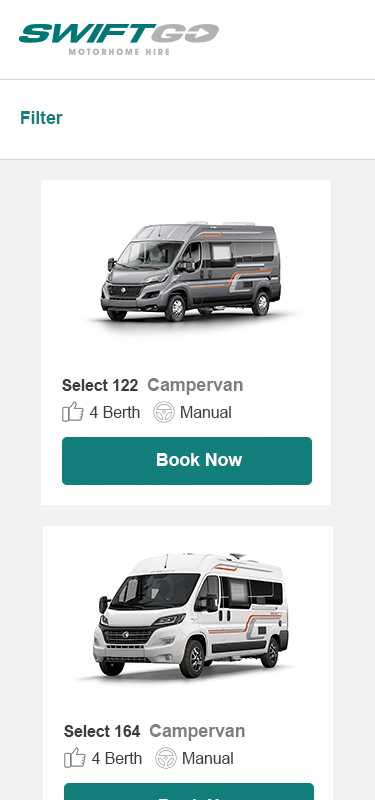
<style>
.page{position:relative;width:375px;height:800px;background:#ffffff}
.page>*{position:absolute;margin:0}
.t1{font:18px "Arial-BoldMT";letter-spacing:-0.01em;color:#117f7a}
.t2{font:16px "Arial-BoldMT";letter-spacing:-0.01em;color:#3c3b3f}
.t3{font:18px "Arial-BoldMT";letter-spacing:-0.01em;color:#7f7e7e}
.t4{font:16px "ArialMT";letter-spacing:-0.01em;color:#3c3b3f}
.t5{font:18px "Arial-BoldMT";letter-spacing:-0.01em;color:#ffffff}
</style>
<div class="page">
<p class="t1" style="left:21px;top:111px;width:42px;height:13px">Filter</p>
<p class="t2" style="left:62px;top:379px;width:76px;height:12px">Select 122</p>
<p class="t3" style="left:147px;top:378px;width:96px;height:17px">Campervan</p>
<p class="t4" style="left:89px;top:406px;width:51px;height:12px">4 Berth</p>
<p class="t4" style="left:181px;top:406px;width:50px;height:12px">Manual</p>
<p class="t5" style="left:157px;top:453px;width:86px;height:13px">Book Now</p>
<p class="t2" style="left:64px;top:725px;width:77px;height:12px">Select 164</p>
<p class="t3" style="left:149px;top:724px;width:96px;height:17px">Campervan</p>
<p class="t4" style="left:91px;top:752px;width:51px;height:12px">4 Berth</p>
<p class="t4" style="left:183px;top:752px;width:50px;height:12px">Manual</p>
</div>
